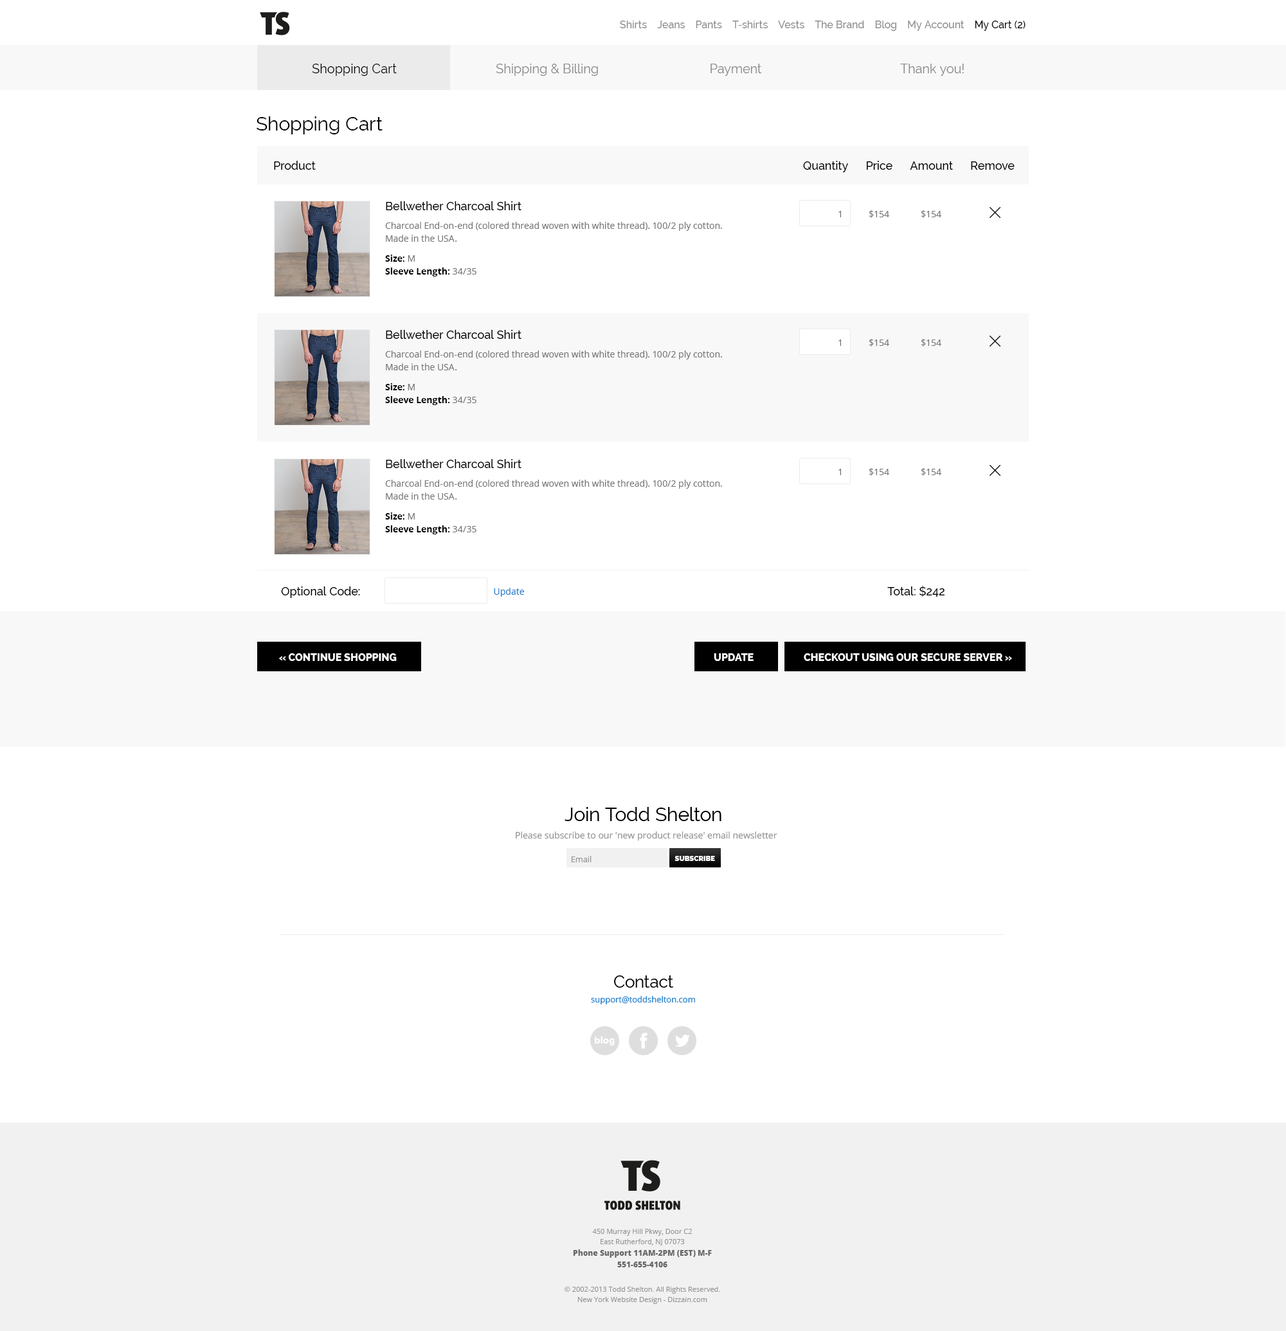
<style>
.page{position:relative;width:1286px;height:1331px;background:#ffffff}
.page>*{position:absolute;margin:0}
.t1{font:10.3px "Raleway-Medium";color:#8b8b8b}
.t2{font:10.3px "Raleway-Medium";color:#000000}
.t3{font:12.9px "Raleway";color:#000000}
.t4{font:12.9px "Raleway";color:#878787}
.t5{font:19.3px "Raleway";color:#000000}
.t6{font:11.6px "Raleway-Medium";color:#000000}
.t7{font:9px/12.9px "OpenSans";color:#757575}
.t8{font:9px "OpenSans";color:#757575}
.t9{font:9px/12.9px "OpenSans-Bold";color:#010101}
.t10{font:9px/12.9px "OpenSans-Bold";color:#000000}
.t11{font:9px "OpenSans";color:#1c7ccd}
.t12{font:10.3px "Raleway-ExtraBold";color:#ffffff;text-transform:uppercase}
</style>
<div class="page">
<p class="t1" style="left:620px;top:21px;width:405px;height:10px">Shirts    Jeans    Pants    T-shirts    Vests    The Brand    Blog    My Account    <span class="t2">My Cart (2)</span></p>
<p class="t3" style="left:312px;top:64px;width:85px;height:12px">Shopping Cart</p>
<p class="t4" style="left:496px;top:64px;width:102px;height:12px">Shipping &amp; Billing</p>
<p class="t4" style="left:710px;top:64px;width:52px;height:12px">Payment</p>
<p class="t4" style="left:900px;top:64px;width:64px;height:12px">Thank you!</p>
<p class="t5" style="left:256px;top:116px;width:126px;height:18px">Shopping Cart</p>
<p class="t6" style="left:274px;top:161px;width:740px;height:11px">Product                            Quantity      Price      Amount      Remove</p>
<p class="t6" style="left:386px;top:201px;width:135px;height:9px">Bellwether Charcoal Shirt</p>
<p class="t7" style="left:385px;top:222px;width:337px;height:20px">Charcoal End-on-end (colored thread woven with white thread). 100/2 ply cotton. Made in the USA.</p>
<p class="t8" style="left:838px;top:211px;width:3px;height:6px">1</p>
<p class="t8" style="left:869px;top:210px;width:20px;height:8px">$154</p>
<p class="t8" style="left:921px;top:210px;width:20px;height:8px">$154</p>
<p class="t9" style="left:385px;top:255px;width:91px;height:21px"><span class="t10">Size: </span><span class="t7">M<br></span>Sleeve Length:<span class="t7"> 34/35</span></p>
<p class="t6" style="left:386px;top:330px;width:135px;height:9px">Bellwether Charcoal Shirt</p>
<p class="t8" style="left:838px;top:339px;width:3px;height:7px">1</p>
<p class="t8" style="left:869px;top:339px;width:20px;height:7px">$154</p>
<p class="t8" style="left:921px;top:339px;width:20px;height:7px">$154</p>
<p class="t7" style="left:385px;top:350px;width:337px;height:20px">Charcoal End-on-end (colored thread woven with white thread). 100/2 ply cotton. Made in the USA.</p>
<p class="t9" style="left:385px;top:383px;width:91px;height:22px"><span class="t10">Size: </span><span class="t7">M<br></span>Sleeve Length:<span class="t7"> 34/35</span></p>
<p class="t6" style="left:386px;top:459px;width:135px;height:9px">Bellwether Charcoal Shirt</p>
<p class="t8" style="left:838px;top:469px;width:3px;height:6px">1</p>
<p class="t8" style="left:869px;top:468px;width:20px;height:8px">$154</p>
<p class="t8" style="left:921px;top:468px;width:20px;height:8px">$154</p>
<p class="t7" style="left:385px;top:480px;width:337px;height:20px">Charcoal End-on-end (colored thread woven with white thread). 100/2 ply cotton. Made in the USA.</p>
<p class="t9" style="left:385px;top:512px;width:91px;height:22px"><span class="t10">Size: </span><span class="t7">M<br></span>Sleeve Length:<span class="t7"> 34/35</span></p>
<p class="t6" style="left:281px;top:586px;width:79px;height:12px">Optional Code:</p>
<p class="t11" style="left:494px;top:588px;width:30px;height:9px">Update</p>
<p class="t6" style="left:887px;top:585px;width:57px;height:12px">Total: $242</p>
<p class="t12" style="left:279px;top:653px;width:118px;height:8px">« CONTINUE SHOPPING</p>
<p class="t12" style="left:714px;top:653px;width:39px;height:8px">Update</p>
<p class="t12" style="left:804px;top:653px;width:208px;height:8px">Checkout Using Our Secure Server »</p>
</div>
